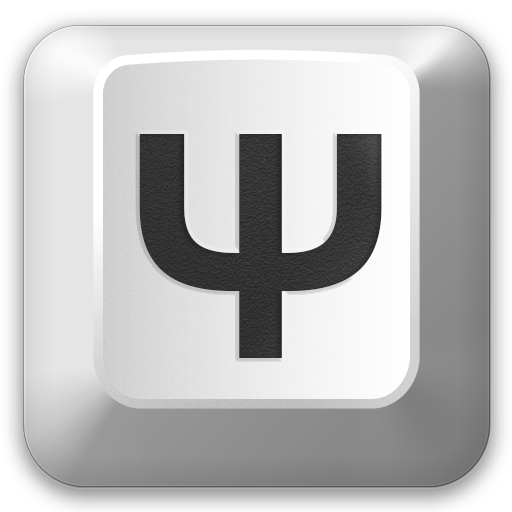
<style>
.page{position:relative;width:512px;height:512px}
.page>*{position:absolute;margin:0}
.t1{font:314.3px "OpenSans-Bold";color:#1e1e1e}
</style>
<div class="page">
<p class="t1" style="left:139px;top:134px;width:243px;height:224px;opacity:0.97">Ψ</p>
</div>
